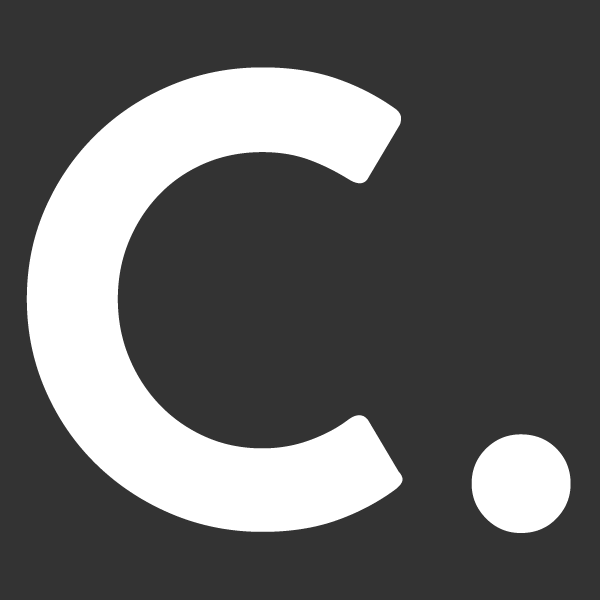
<style>
.page{position:relative;width:600px;height:600px;background:#333333}
.page>*{position:absolute;margin:0}
.t1{font:607.5px "CocoGothic-Bold";letter-spacing:0.005em;color:#ffffff}
</style>
<div class="page">
<p class="t1" style="left:26px;top:67px;width:545px;height:466px">C.</p>
</div>
